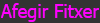
<style>
.page{position:relative;width:100px;height:23px;background:#333333}
.page>*{position:absolute;margin:0}
.t1{font:18.5px "Tahoma";color:#ff00ff}
</style>
<div class="page">
<p class="t1" style="left:1px;top:3px;width:98px;height:19px">Afegir Fitxer</p>
</div>
